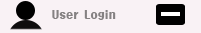
<style>
.page{position:relative;width:201px;height:33px;background:#f9f2f5}
.page>*{position:absolute;margin:0}
.t1{font:10px "HeadlineR-HM";color:#858182}
</style>
<div class="page">
<p class="t1" style="left:52px;top:10px;width:64px;height:10px">User Login</p>
</div>
